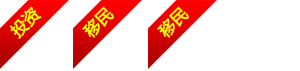
<style>
.page{position:relative;width:300px;height:71px;background:#ffffff}
.page>*{position:absolute;margin:0}
.t1{font:16px "MicrosoftYaHei";color:#fffc00;font-weight:bold}
</style>
<div class="page">
<p class="t1" style="left:82px;top:6px;width:32px;height:32px;rotate:-45deg">移民</p>
<p class="t1" style="left:157px;top:6px;width:32px;height:32px;rotate:-45deg">移民</p>
</div>
